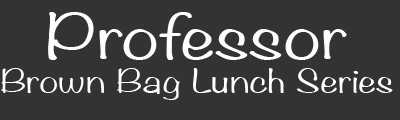
<style>
.page{position:relative;width:400px;height:120px;background:#333333}
.page>*{position:absolute;margin:0}
.t1{font:55px "Noteworthy-Light";color:#fefcfc;scale:1.5 1}
.t2{font:28px "Noteworthy-Light";color:#fefcfc;scale:1.5 1}
</style>
<div class="page">
<p class="t1" style="left:48px;top:12px;width:299px;height:48px">Professor</p>
<p class="t2" style="left:1px;top:68px;width:392px;height:32px">Brown Bag Lunch Series</p>
</div>
